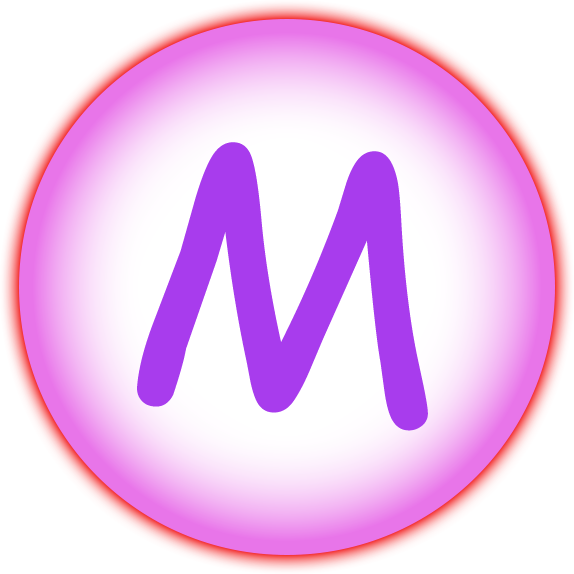
<style>
.page{position:relative;width:574px;height:574px;background:#ffffff}
.page>*{position:absolute;margin:0}
.t1{font:348.6px "ComicSansMS";color:#a83ced;scale:1.06 1}
</style>
<div class="page">
<p class="t1" style="left:137px;top:142px;width:291px;height:289px;rotate:5deg">M</p>
</div>
